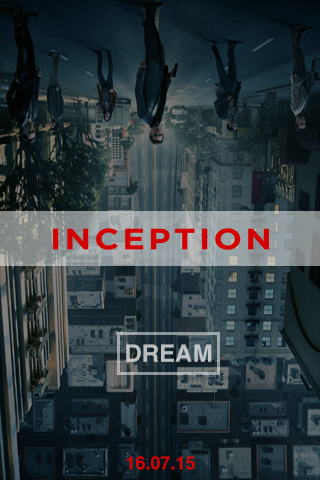
<style>
.page{position:relative;width:320px;height:480px}
.page>*{position:absolute;margin:0}
.t1{font:24px "Helvetica-Bold";color:#bcbfc0}
.t2{font:18px "Helvetica-Bold";color:#d10303}
</style>
<div class="page">
<p class="t1" style="left:126px;top:344px;width:86px;height:18px">DREAM</p>
<p class="t2" style="left:126px;top:456px;width:69px;height:14px">16.07.15</p>
</div>
